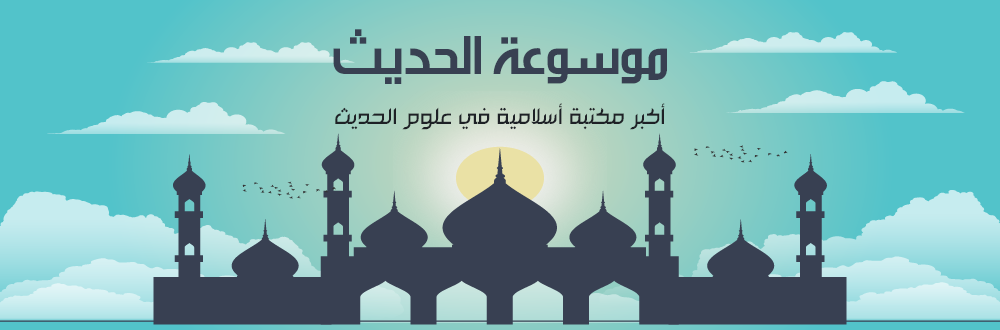
<style>
.page{position:relative;width:1000px;height:330px}
.page>*{position:absolute;margin:0}
.t1{font:65px "AlarabiyaFont-Normal";color:#384052}
.t2{font:30px "HSN_Ibtisam";color:#1e2126}
</style>
<div class="page">
<p class="t1" style="left:333px;top:29px;width:334px;height:55px">موسوعة الحديث</p>
<p class="t2" style="left:335px;top:103px;width:330px;height:27px">أكبر مكتبة أسلامية في علوم الحديث</p>
</div>
